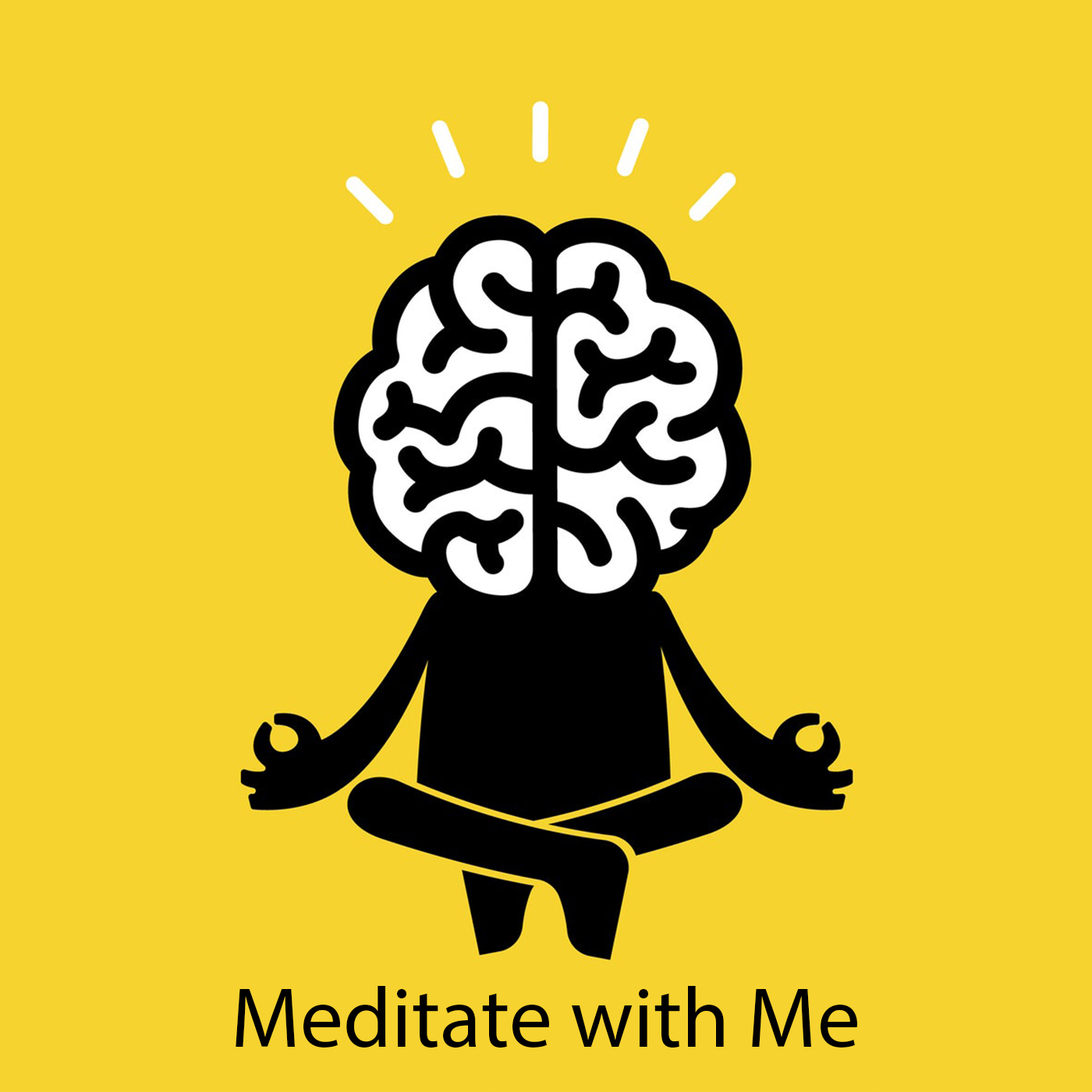
<style>
.page{position:relative;width:1092px;height:1092px;background:#f6d32f}
.page>*{position:absolute;margin:0}
.t1{font:85.8px "MyriadPro-Regular";color:#000000}
</style>
<div class="page">
<p class="t1" style="left:236px;top:986px;width:621px;height:62px">Meditate with Me</p>
</div>
